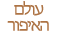
<style>
.page{position:relative;width:58px;height:35px;background:#ffffff}
.page>*{position:absolute;margin:0}
.t1{font:18px/8px "MyriadHebrew-Regular";letter-spacing:-0.09em;color:#ad7344}
.t2{font:18px/11px "MyriadHebrew-Regular";letter-spacing:-0.09em;color:#ad7344}
</style>
<div class="page">
<p class="t1" style="left:7px;top:1px;width:42px;height:30px;text-align:center"><span class="t2"><br></span>םלוע<br><br>רופיאה</p>
</div>
